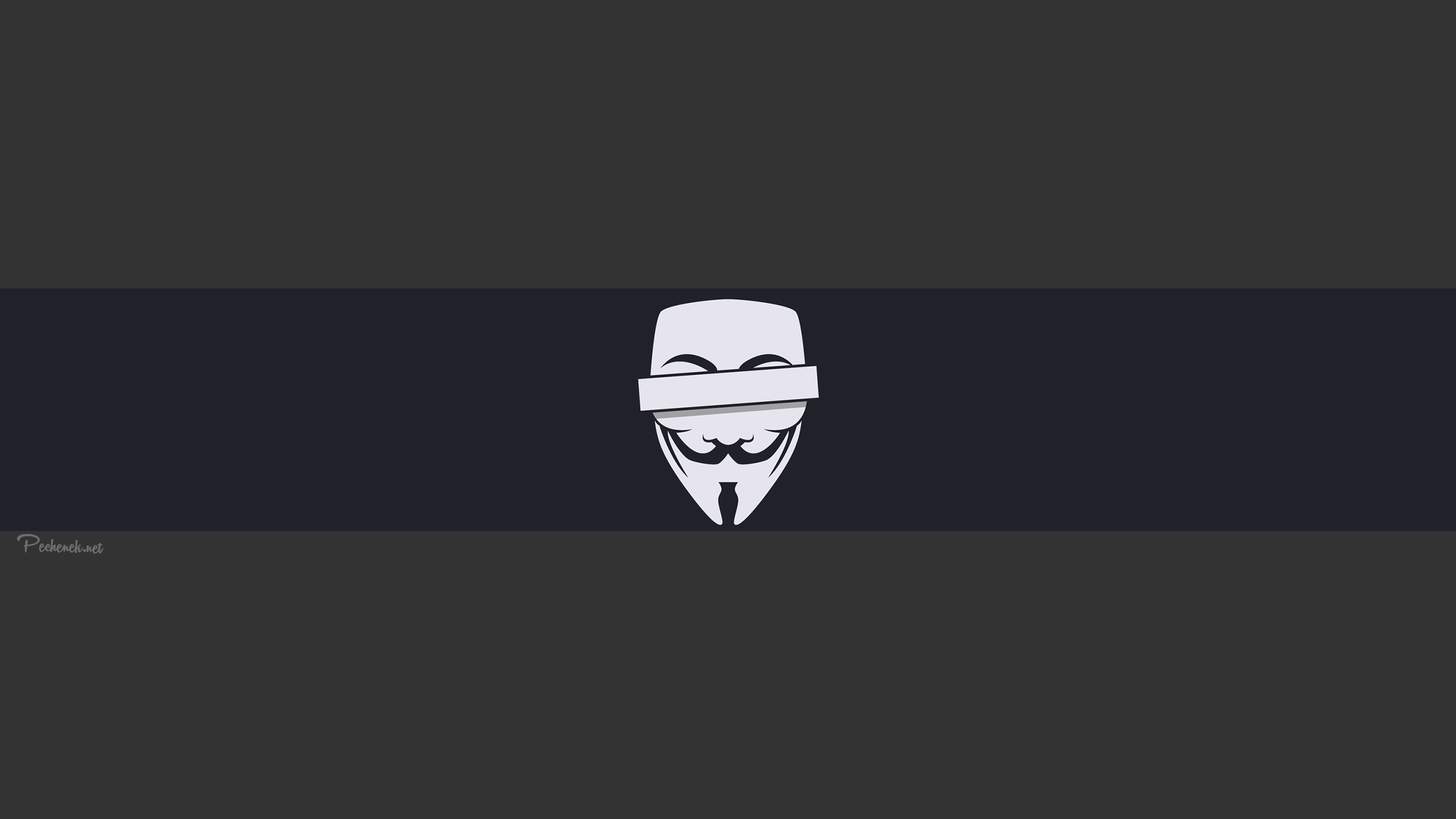
<style>
.page{position:relative;width:1456px;height:819px;background:#333333}
.page>*{position:absolute;margin:0}
.t1{font:26.1px "Vantom";color:#6e6e6e}
</style>
<div class="page">
<p class="t1" style="left:16px;top:533px;width:88px;height:21px;rotate:2deg">Pechenek.net</p>
</div>
